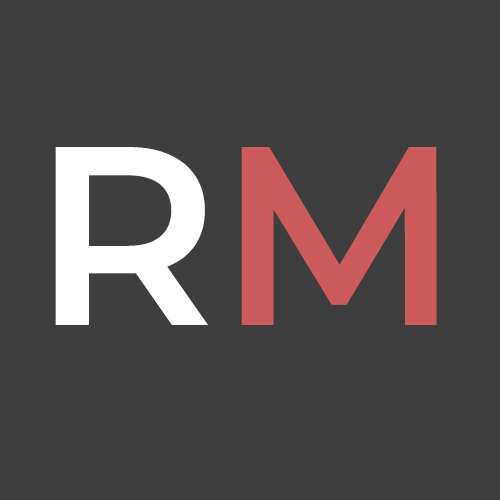
<style>
.page{position:relative;width:500px;height:500px;background:#3e3e3e}
.page>*{position:absolute;margin:0}
.t1{font:254px "Montserrat-SemiBold";color:#ffffff}
.t2{font:254px "Montserrat-SemiBold";color:#cd5b5b}
</style>
<div class="page">
<p class="t1" style="left:55px;top:147px;width:382px;height:178px">R<span class="t2">M</span></p>
</div>
